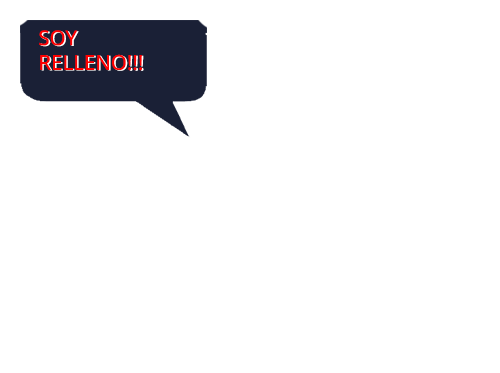
<style>
.page{position:relative;width:500px;height:373px;background:#ffffff}
.page>*{position:absolute;margin:0}
.t1{font:20.5px "NotoSans-Regular";color:#ff0000}
.t2{font:20.5px "NotoSans-Regular"}
</style>
<div class="page">
<p class="t1" style="left:39px;top:30px;width:103px;height:41px">SOY<br>RELLENO!!!</p>
<p class="t2" style="left:40px;top:31px;width:104px;height:40px">SOY<br>RELLENO!!!</p>
</div>
